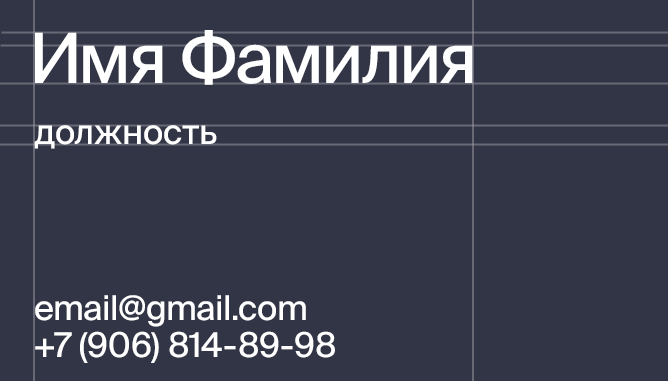
<style>
.page{position:relative;width:668px;height:381px;background:#313546}
.page>*{position:absolute;margin:0}
.t1{font:69.2px "SuisseIntl-Book";letter-spacing:-0.03em;color:#ffffff}
.t2{font:34.2px "SuisseIntl-Book";color:#ffffff}
</style>
<div class="page">
<p class="t1" style="left:35px;top:30px;width:438px;height:55px">Имя Фамилия</p>
<p class="t2" style="left:34px;top:125px;width:183px;height:24px">должность</p>
<p class="t2" style="left:35px;top:295px;width:271px;height:32px">email@gmail.com</p>
<p class="t2" style="left:35px;top:331px;width:300px;height:32px">+7 (906) 814-89-98</p>
</div>
